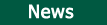
<style>
.page{position:relative;width:107px;height:25px;background:#005941}
.page>*{position:absolute;margin:0}
.t1{font:18px "Tahoma";letter-spacing:0.02em;color:#ffffff;font-weight:bold}
</style>
<div class="page">
<p class="t1" style="left:29px;top:4px;width:45px;height:15px">News</p>
</div>
